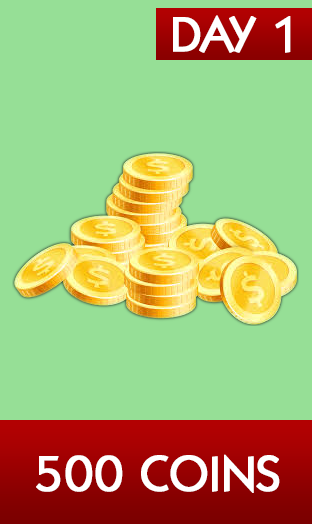
<style>
.page{position:relative;width:315px;height:524px;background:#96df96}
.page>*{position:absolute;margin:0}
.t1{font:47.3px "KoblenzSerial-Regular";color:#ffffff;text-transform:uppercase;font-weight:bold}
</style>
<div class="page">
<p class="t1" style="left:173px;top:15px;width:118px;height:38px">day 1</p>
<p class="t1" style="left:36px;top:454px;width:244px;height:39px">500 coins</p>
</div>
